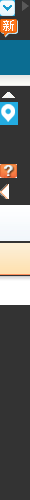
<style>
.page{position:relative;width:30px;height:500px;background:#333333}
.page>*{position:absolute;margin:0}
.t1{font:12px "SimSun";color:#fffefe}
</style>
<div class="page">
<p class="t1" style="left:3px;top:20px;width:11px;height:11px">新</p>
</div>
